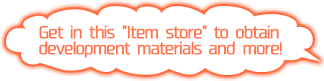
<style>
.page{position:relative;width:324px;height:81px;background:#ffffff}
.page>*{position:absolute;margin:0}
.t1{font:16px/16px "04KanjyukuGothic";letter-spacing:-0.08em;color:#fe754e;font-weight:bold}
</style>
<div class="page">
<p class="t1" style="left:39px;top:25px;width:243px;height:33px">Get in this ＂Item store＂ to obtain<br>development materials and more!</p>
</div>
